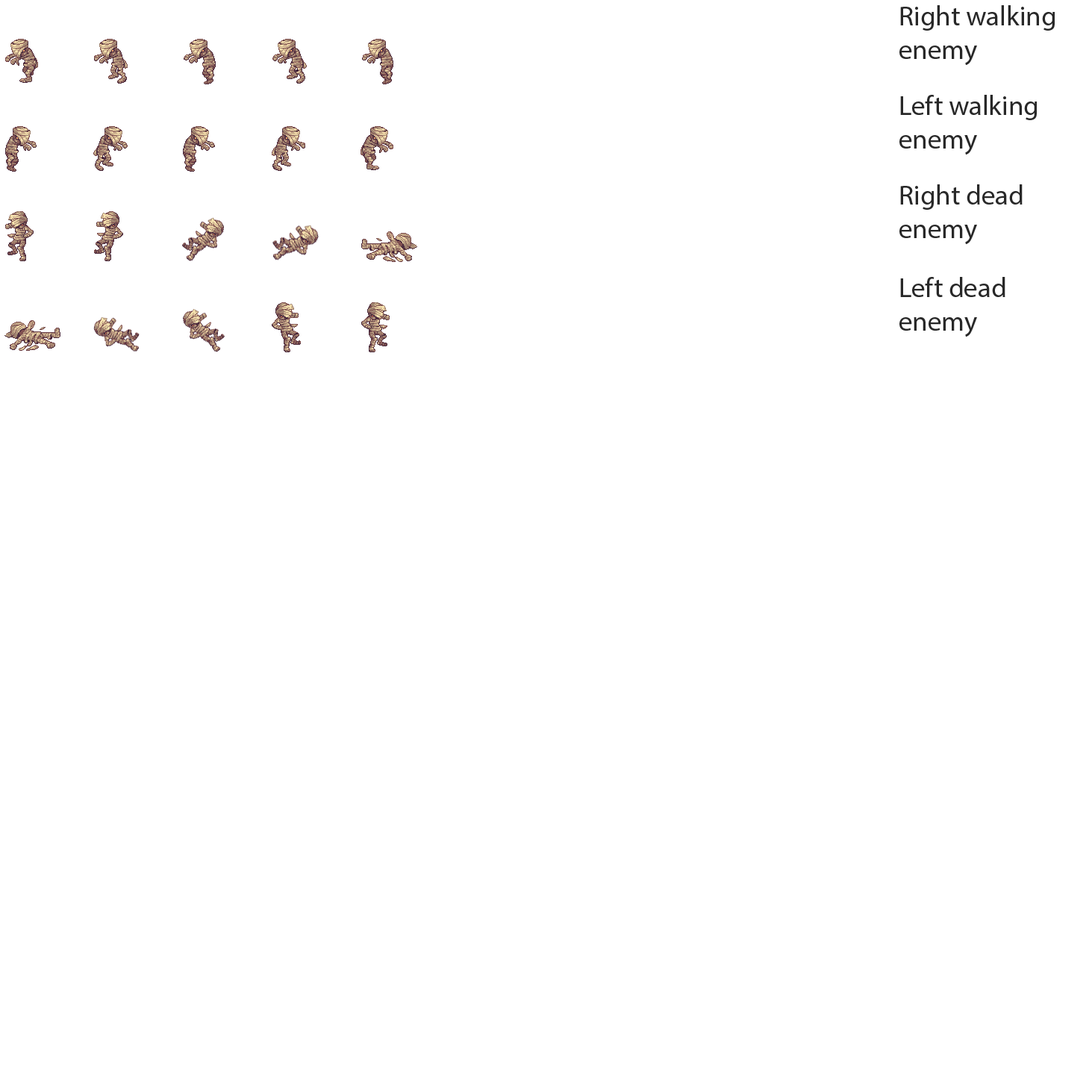
<style>
.page{position:relative;width:1092px;height:1092px;background:#ffffff}
.page>*{position:absolute;margin:0}
.t1{font:27.6px "MyriadPro-Regular";color:#282828}
</style>
<div class="page">
<p class="t1" style="left:899px;top:5px;width:156px;height:60px">Right walking enemy</p>
<p class="t1" style="left:899px;top:95px;width:138px;height:60px">Left walking enemy</p>
<p class="t1" style="left:899px;top:184px;width:124px;height:60px">Right dead enemy</p>
<p class="t1" style="left:899px;top:277px;width:106px;height:60px">Left dead  enemy</p>
</div>
